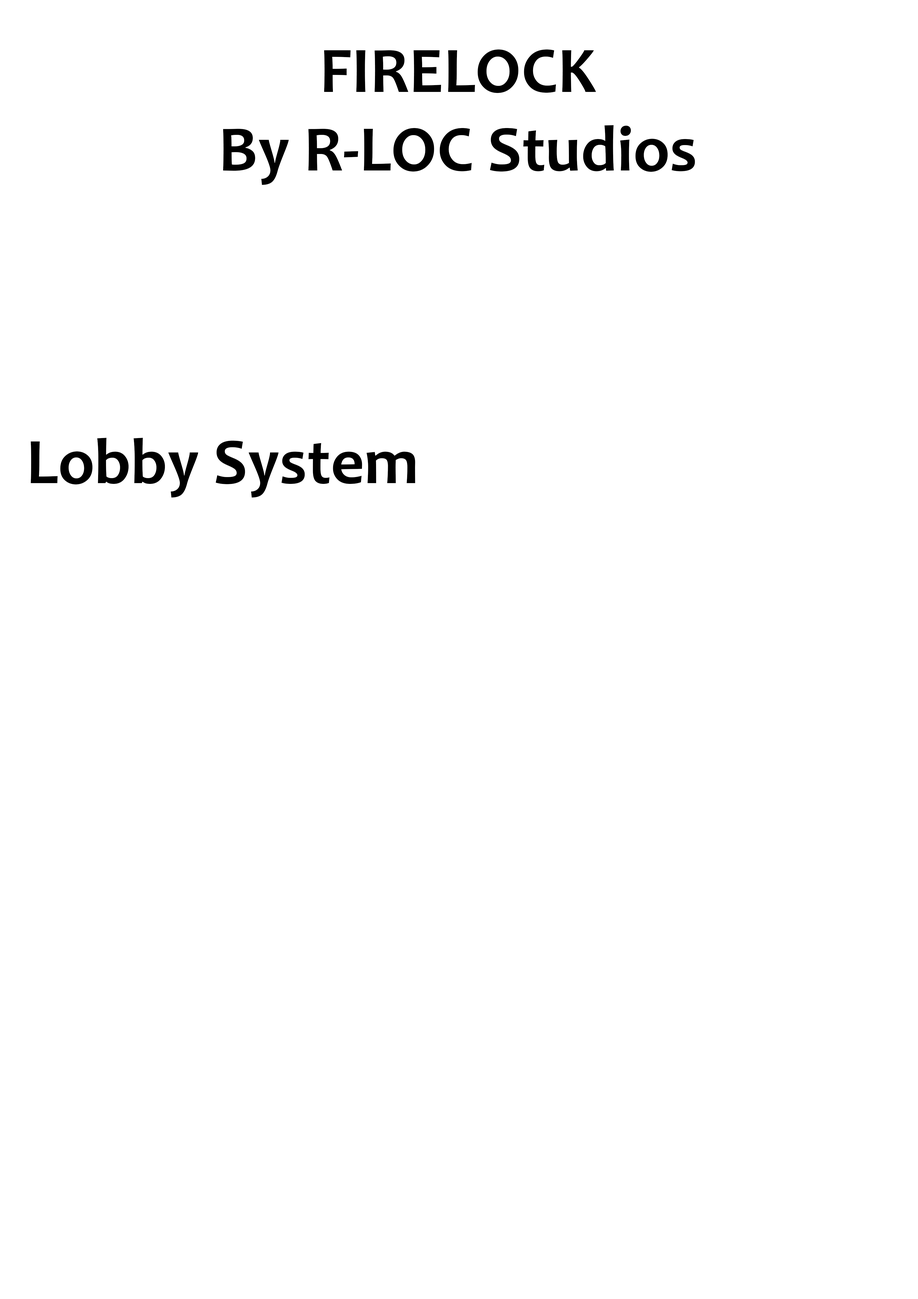
<style>
.page{position:relative;width:918px;height:1299px;background:#ffffff}
.page>*{position:absolute;margin:0}
.t1{font:65.4px "Candara-Bold";color:#000000}
</style>
<div class="page">
<p class="t1" style="left:223px;top:49px;width:472px;height:136px;text-align:center">FIRELOCK<br>By R-LOC Studios</p>
<p class="t1" style="left:31px;top:438px;width:384px;height:59px">Lobby System</p>
</div>
